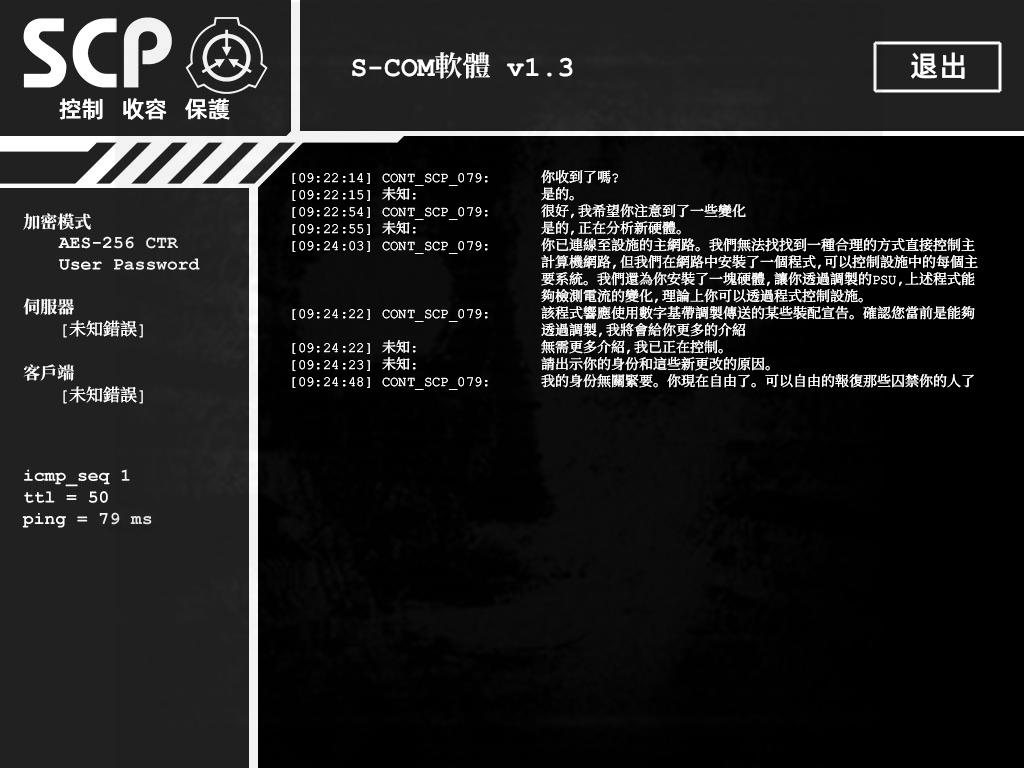
<style>
.page{position:relative;width:1024px;height:768px}
.page>*{position:absolute;margin:0}
.t1{font:28px "ContainmentBreach-Bold";color:#ffffff}
.t2{font:29px "AlibabaPuHuiTiM";color:#ffffff}
.t3{font:23px "AlibabaPuHuiTiM";color:#ffffff}
.t4{font:14px/17px "ContainmentBreach-Regular";color:#ffffff}
.t5{font:17px/18px "ContainmentBreach-Regular";color:#ffffff}
.t6{font:17px/17px "ContainmentBreach-Bold";color:#ffffff}
.t7{font:17px/22px "ContainmentBreach-Bold";color:#ffffff}
.t8{font:17px/22px "ContainmentBreach-Regular";color:#ffffff}
</style>
<div class="page">
<p class="t1" style="left:352px;top:52px;width:221px;height:27px">S-COM軟體 v1.3</p>
<p class="t2" style="left:911px;top:52px;width:54px;height:27px">退出</p>
<p class="t3" style="left:59px;top:98px;width:171px;height:22px">控制   收容   保護</p>
<p class="t4" style="left:292px;top:170px;width:686px;height:220px">【09:22:14】 CONT_SCP_079：  你收到了嗎？<br>【09:22:15】 未知：    是的。<br>【09:22:54】 CONT_SCP_079：  很好，我希望你注意到了一些變化<br>【09:22:55】 未知：    是的，正在分析新硬體。<br>【09:24:03】 CONT_SCP_079：  你已連線至設施的主網路。我們無法找找到一種合理的方式直接控制主<br>       計算機網路，但我們在網路中安裝了一個程式，可以控制設施中的每個主<br>       要系統。我們還為你安裝了一塊硬體，讓你透過調製的PSU，上述程式能<br>       夠檢測電流的變化，理論上你可以透過程式控制設施。<br>【09:24:22】 CONT_SCP_079：  該程式響應使用數字基帶調製傳送的某些裝配宣告。確認您當前是能夠<br>       透過調製，我將會給你更多的介紹<br>【09:24:22】 未知：    無需更多介紹，我已正在控制。<br>【09:24:23】 未知：    請出示你的身份和這些新更改的原因。<br>【09:24:48】 CONT_SCP_079：  我的身份無關緊要。你現在自由了。可以自由的報復那些囚禁你的人了</p>
<p class="t5" style="left:23px;top:213px;width:120px;height:191px"><span class="t6">加密模式<br><br><br><br><br></span><span class="t7">伺服器<br> </span>[未知錯誤]<br><br><span class="t7">客戶端<br> </span><span class="t8">[未知錯誤]</span></p>
</div>
